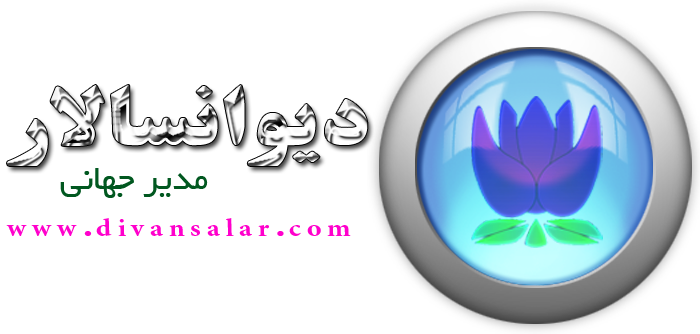
<style>
.page{position:relative;width:700px;height:334px;background:#ffffff}
.page>*{position:absolute;margin:0}
.t1{font:38.1px "BYekan";color:#015820}
.t2{font:24.7px "BTitrBold";letter-spacing:0.2em;color:#ff00cc;scale:1.14 1}
</style>
<div class="page">
<p class="t1" style="left:60px;top:168px;width:148px;height:30px">مدير جهاني</p>
<p class="t2" style="left:6px;top:218px;width:345px;height:18px">www.divansalar.com</p>
</div>
